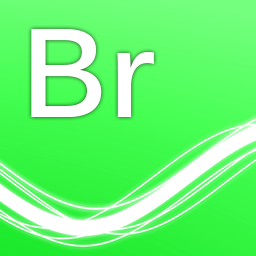
<style>
.page{position:relative;width:256px;height:256px}
.page>*{position:absolute;margin:0}
.t1{font:124px "Kalinga-Bold";color:#ffffff}
</style>
<div class="page">
<p class="t1" style="left:31px;top:29px;width:123px;height:88px">Br</p>
</div>
